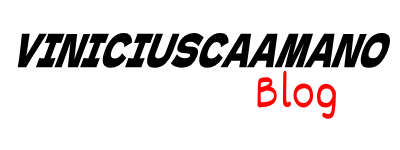
<style>
.page{position:relative;width:400px;height:150px;background:#ffffff}
.page>*{position:absolute;margin:0}
.t1{font:49px "DelaGothicOne-Regular";color:#000000;scale:0.57 1}
.t2{font:49.8px "Dekko";color:#ff0202}
</style>
<div class="page">
<p class="t1" style="left:17px;top:33px;width:373px;height:35px">VINICIUSCAAMANO</p>
<p class="t2" style="left:257px;top:70px;width:79px;height:49px">Blog</p>
</div>
